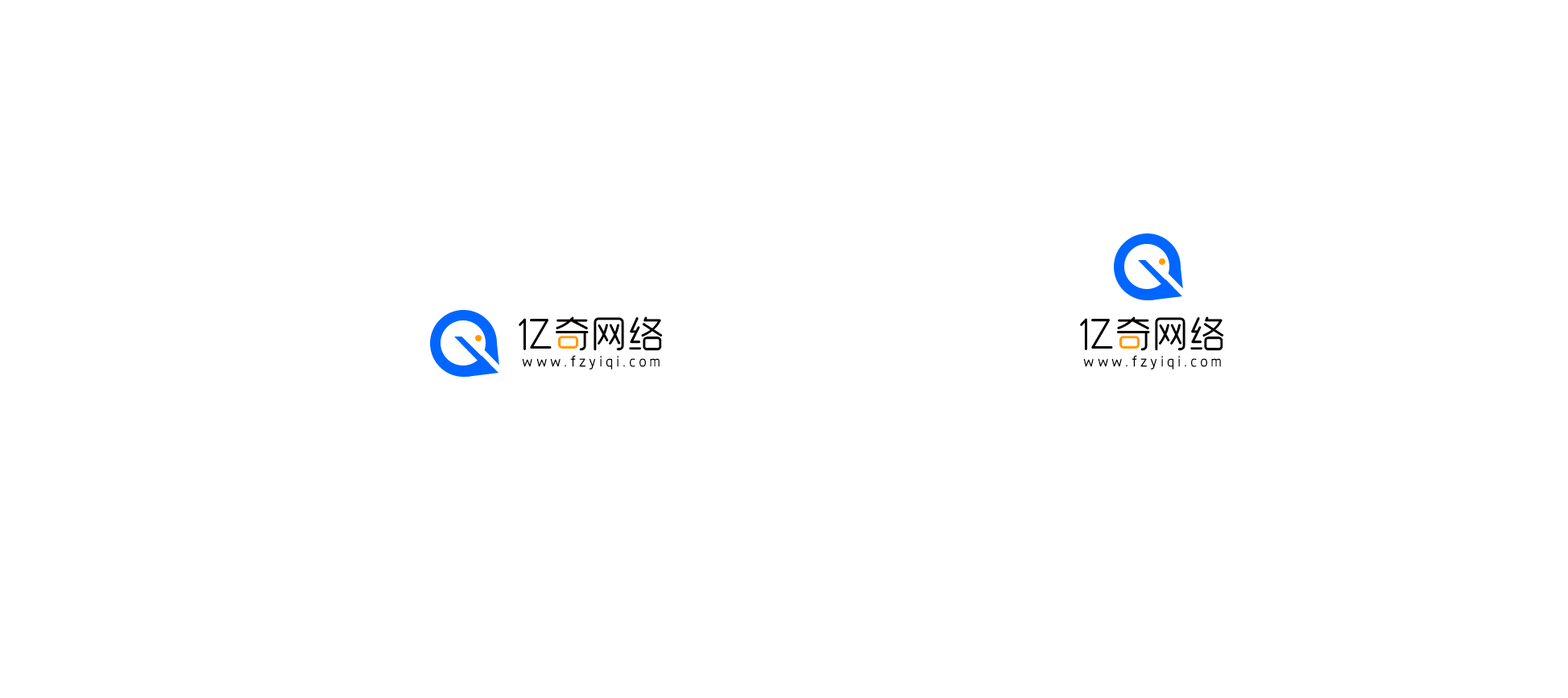
<style>
.page{position:relative;width:1568px;height:698px;background:#ffffff}
.page>*{position:absolute;margin:0}
.t1{font:37.5px "MFYueYuan_Noncommercial-Regular";color:#000000}
.t2{font:15.1px "MFYueYuan_Noncommercial-Regular";letter-spacing:0.2em;color:#000000}
</style>
<div class="page">
<p class="t1" style="left:519px;top:316px;width:144px;height:35px">亿奇网络</p>
<p class="t1" style="left:1080px;top:316px;width:144px;height:35px">亿奇网络</p>
<p class="t2" style="left:522px;top:355px;width:138px;height:15px">www.fzyiqi.com</p>
<p class="t2" style="left:1083px;top:355px;width:138px;height:15px">www.fzyiqi.com</p>
</div>
